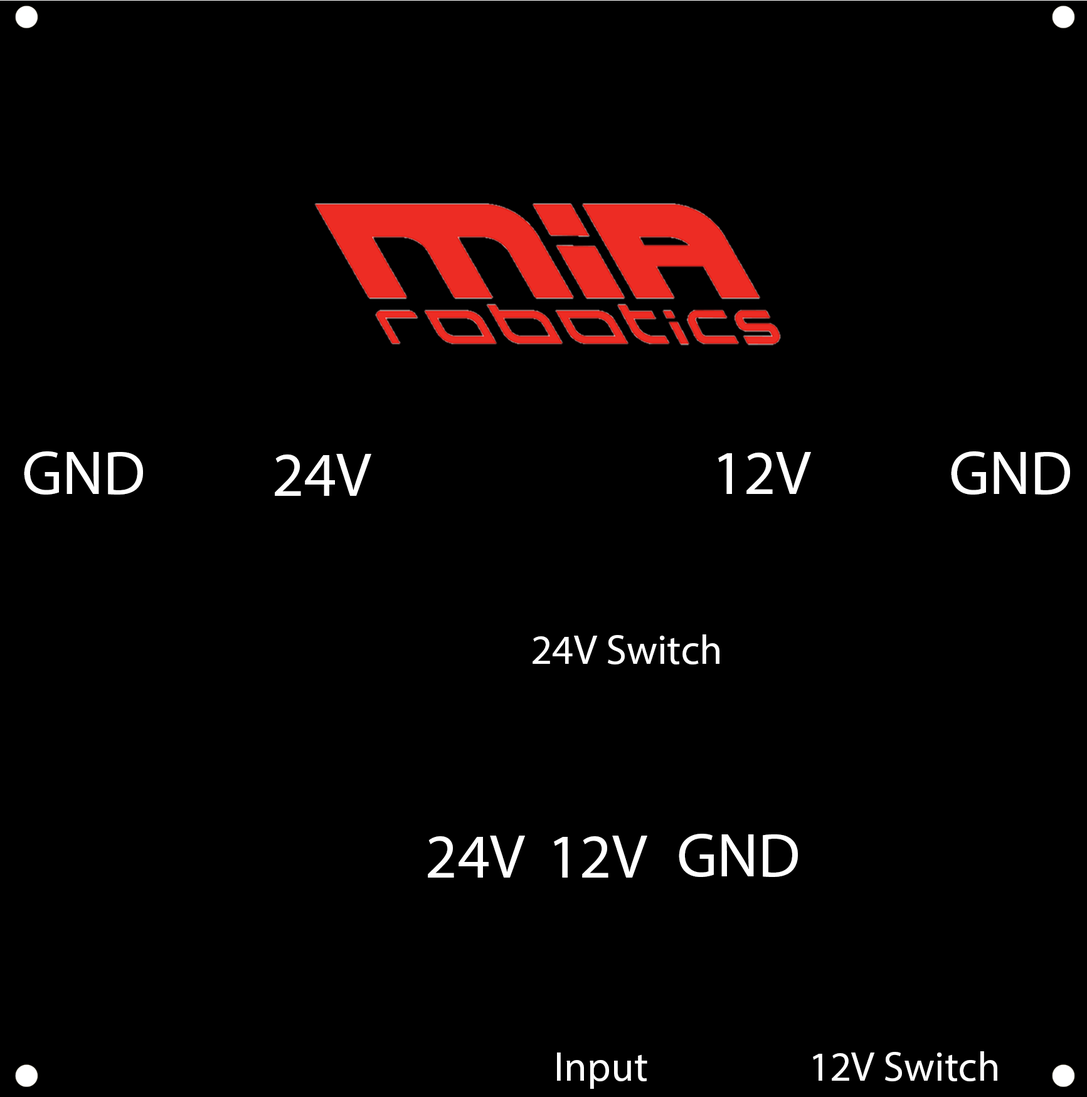
<style>
.page{position:relative;width:1087px;height:1097px;background:#000000}
.page>*{position:absolute;margin:0}
.t1{font:62.7px "MyriadPro-Regular";color:#ffffff}
.t2{font:41.8px "MyriadPro-Regular";color:#ffffff}
</style>
<div class="page">
<p class="t1" style="left:24px;top:451px;width:119px;height:44px">GND</p>
<p class="t1" style="left:275px;top:454px;width:96px;height:42px">24V</p>
<p class="t1" style="left:718px;top:452px;width:93px;height:42px">12V</p>
<p class="t1" style="left:951px;top:451px;width:119px;height:44px">GND</p>
<p class="t2" style="left:532px;top:635px;width:187px;height:30px">24V Switch</p>
<p class="t1" style="left:678px;top:834px;width:120px;height:43px">GND</p>
<p class="t1" style="left:428px;top:836px;width:97px;height:42px">24V<br><br><br>V</p>
<p class="t1" style="left:554px;top:836px;width:93px;height:42px">12V</p>
<p class="t2" style="left:557px;top:1053px;width:90px;height:36px">Input</p>
<p class="t2" style="left:813px;top:1052px;width:184px;height:30px">12V Switch</p>
</div>
